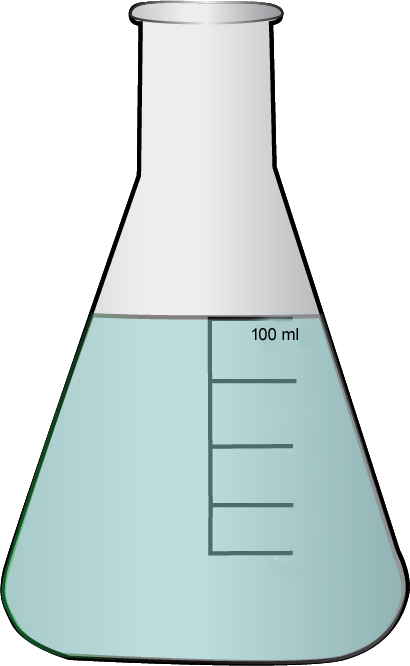
<style>
.page{position:relative;width:410px;height:666px;background:#ffffff}
.page>*{position:absolute;margin:0}
.t1{font:16.7px "ArialMT";color:#000000}
</style>
<div class="page">
<p class="t1" style="left:252px;top:328px;width:46px;height:13px">100 ml</p>
</div>
